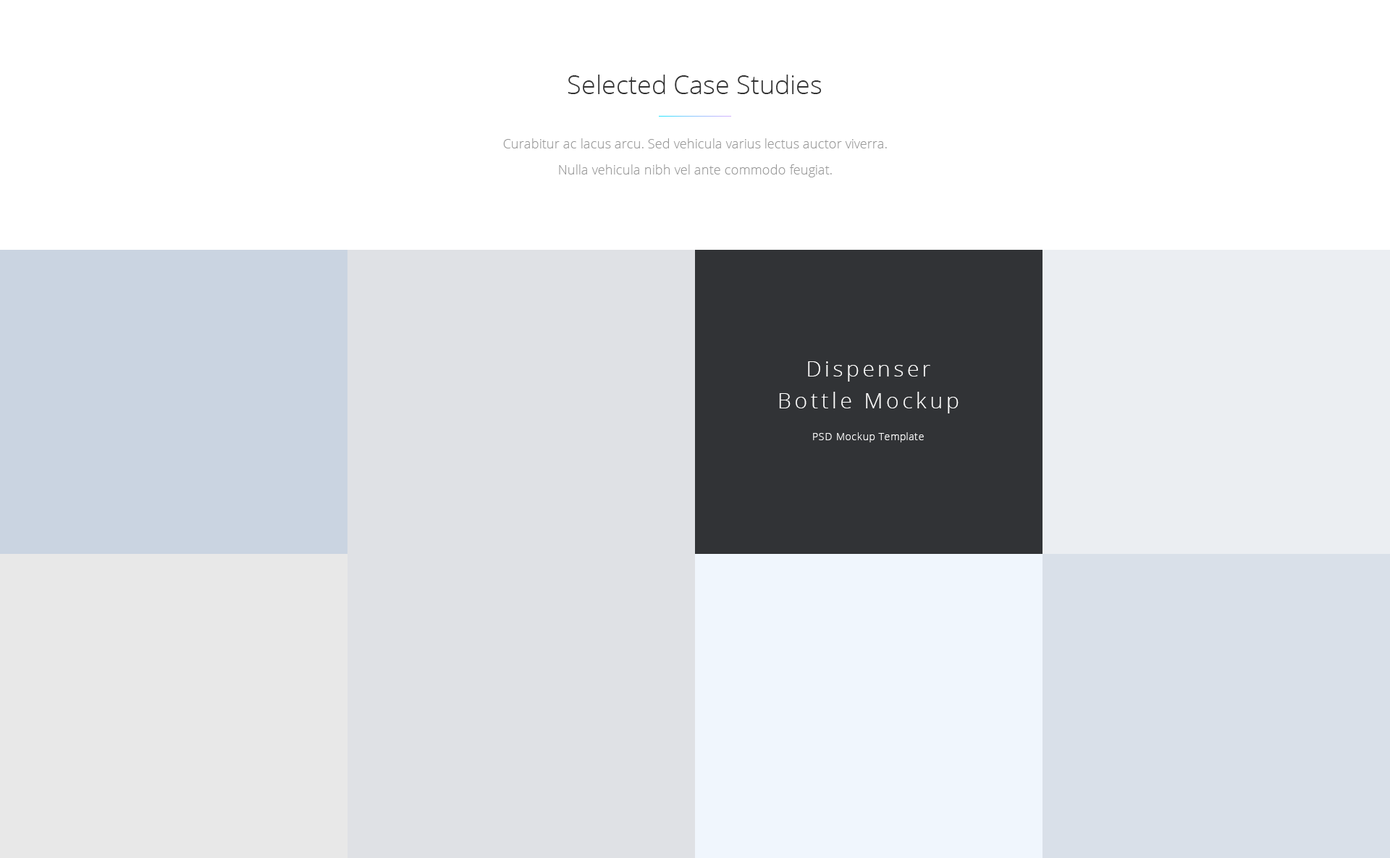
<style>
.page{position:relative;width:1390px;height:858px;background:#ffffff}
.page>*{position:absolute;margin:0}
.t1{font:26.1px "OpenSans-Light";color:#333333}
.t2{font:13px/26.1px "OpenSans-Light";color:#999999}
.t3{font:21.7px/31.9px "OpenSans-Light";letter-spacing:0.15em;color:#ffffff}
.t4{font:10.1px/31.9px "OpenSans-Light";letter-spacing:0.05em;color:#ffffff}
</style>
<div class="page">
<p class="t1" style="left:568px;top:75px;width:254px;height:19px">Selected Case Studies</p>
<p class="t2" style="left:503px;top:138px;width:384px;height:39px;text-align:center">Curabitur ac lacus arcu. Sed vehicula varius lectus auctor viverra. Nulla vehicula nibh vel ante commodo feugiat.</p>
<p class="t3" style="left:779px;top:361px;width:180px;height:81px;text-align:center">Dispenser<br>Bottle Mockup<br><span class="t4">PSD Mockup Template</span></p>
</div>
